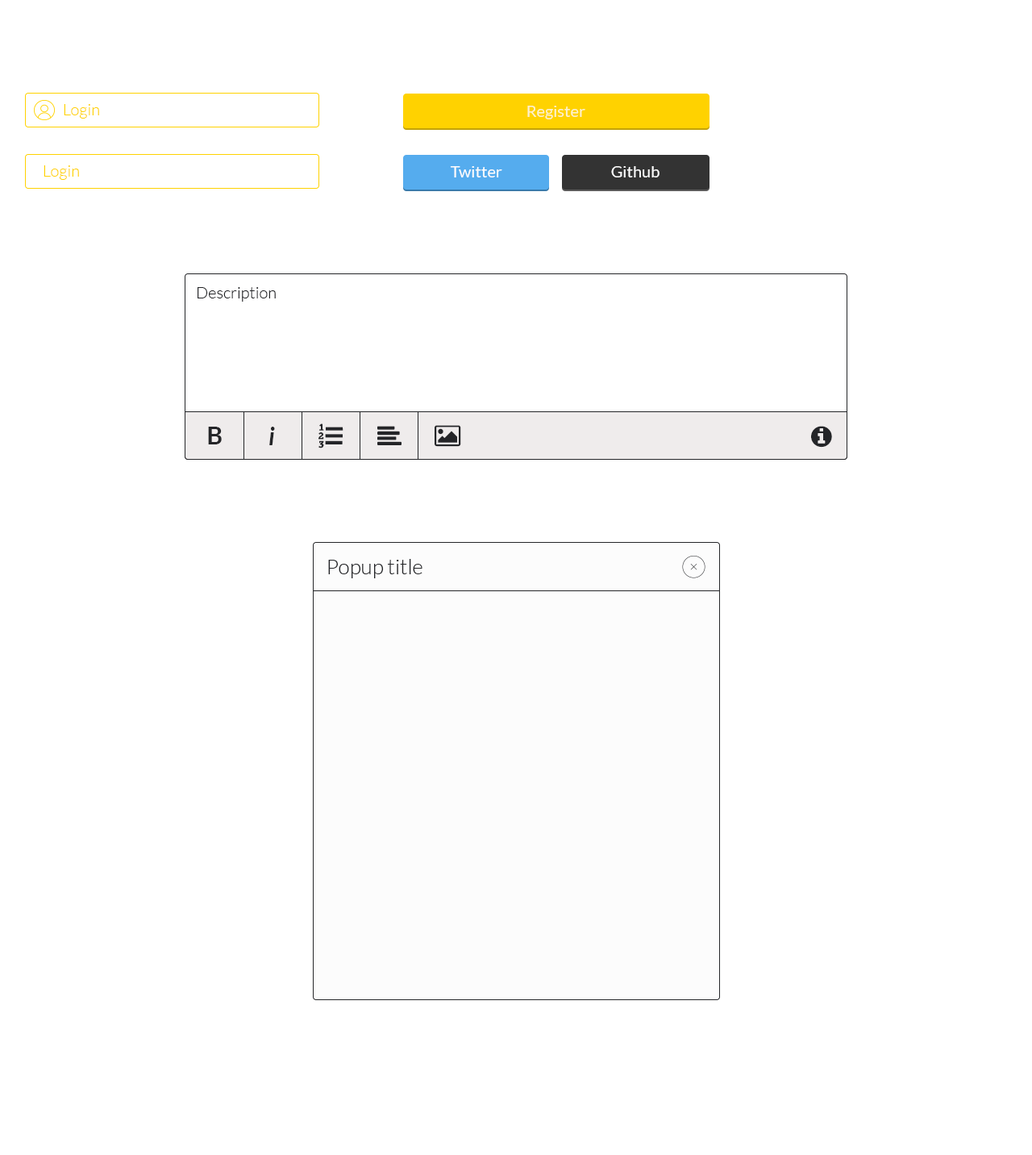
<style>
.page{position:relative;width:1032px;height:1155px;background:#ffffff}
.page>*{position:absolute;margin:0}
.t1{font:16.1px "Lato-Light";color:#ffd200}
.t2{font:16.1px "Lato-Regular";color:#fdf1cb}
.t3{font:16.1px "Lato-Regular";color:#fcfcfc}
.t4{font:16.1px "Lato-Light";color:#242528}
.t5{font:24.2px "Lato-Bold";color:#242528}
.t6{font:24.2px "Lato-BoldItalic";color:#242528}
.t7{font:21px "Lato-Light";color:#242528}
</style>
<div class="page">
<p class="t1" style="left:64px;top:104px;width:35px;height:15px">Login</p>
<p class="t2" style="left:527px;top:106px;width:59px;height:13px">Register</p>
<p class="t1" style="left:44px;top:165px;width:35px;height:15px">Login</p>
<p class="t3" style="left:450px;top:166px;width:52px;height:11px">Twitter</p>
<p class="t3" style="left:611px;top:166px;width:49px;height:11px">Github</p>
<p class="t4" style="left:198px;top:287px;width:78px;height:15px">Description</p>
<p class="t5" style="left:208px;top:427px;width:14px;height:17px">B</p>
<p class="t6" style="left:269px;top:427px;width:6px;height:18px">i</p>
<p class="t7" style="left:328px;top:559px;width:95px;height:19px">Popup title</p>
</div>
